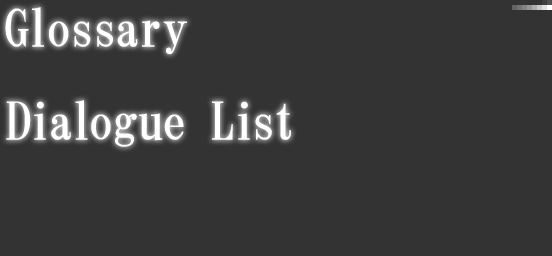
<style>
.page{position:relative;width:552px;height:256px;background:#333333}
.page>*{position:absolute;margin:0}
.t1{font:52px/93px "HGMinchoB";letter-spacing:-0.025em;color:#ffffff}
.t2{font:52px/93px "HGMinchoB";letter-spacing:-0.05em;color:#ffffff}
</style>
<div class="page">
<p class="t1" style="left:5px;top:7px;width:286px;height:140px">Glossary<br>Di<span class="t2">al</span>ogue L<span class="t2">i</span>st</p>
</div>
